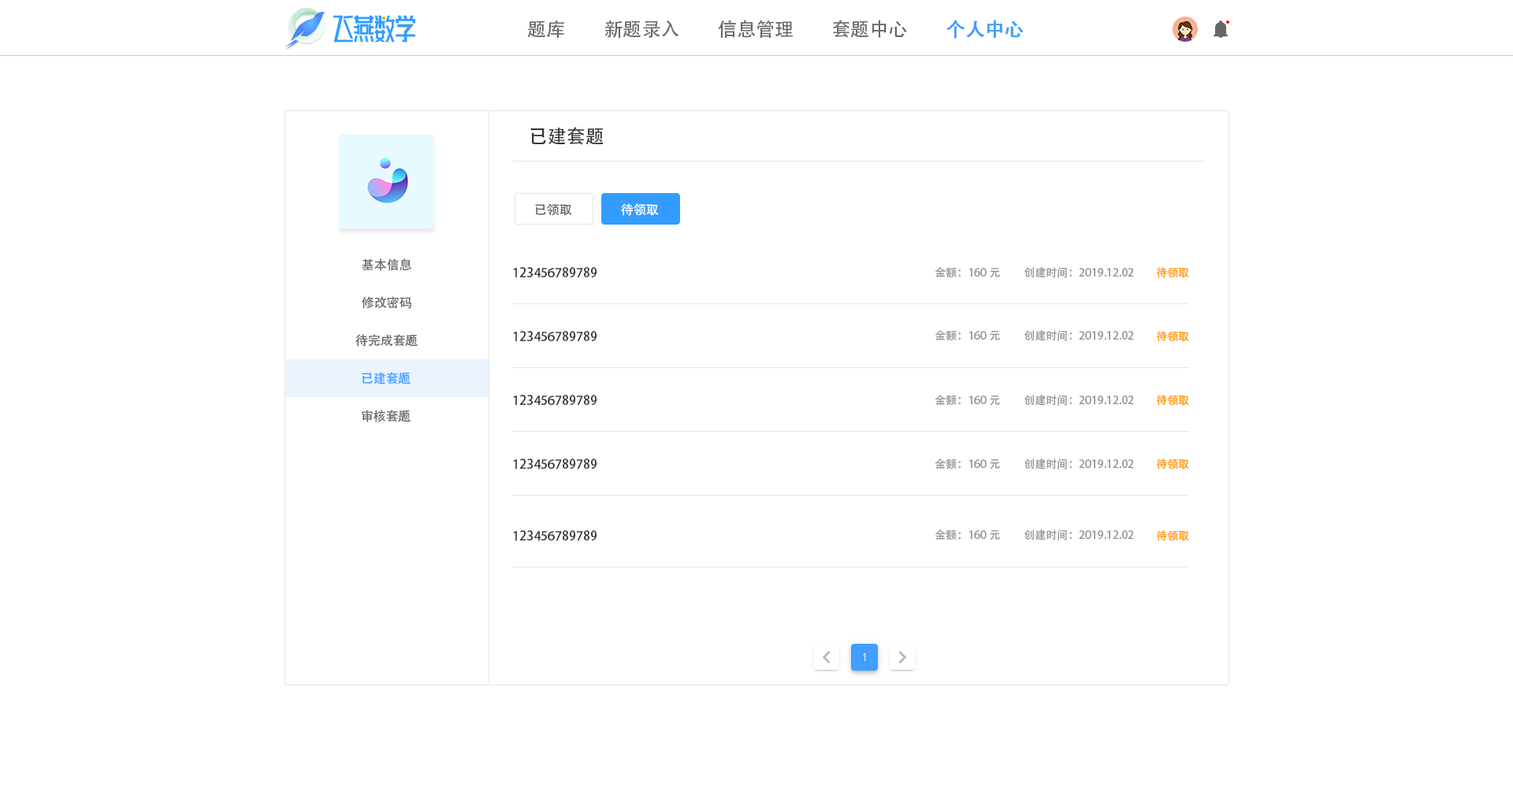
<style>
.page{position:relative;width:1513px;height:788px;background:#ffffff}
.page>*{position:absolute;margin:0}
.t1{font:18.9px "AdobeHeitiStd-Regular";color:#666666}
.t2{font:18.9px "AdobeHeitiStd-Regular";color:#409eff;font-weight:bold}
.t3{font:18.9px "AdobeHeitiStd-Regular";color:#333333}
.t4{font:12.6px "AdobeHeitiStd-Regular";color:#666666}
.t5{font:12.6px "AdobeHeitiStd-Regular";color:#ffffff}
.t6{font:12.6px "AdobeHeitiStd-Regular";color:#333333}
.t7{font:11px "AdobeHeitiStd-Regular";color:#999999}
.t8{font:11px "AdobeHeitiStd-Regular";color:#ff9814}
.t9{font:12.6px "AdobeHeitiStd-Regular";color:#409eff}
</style>
<div class="page">
<p class="t1" style="left:527px;top:20px;width:37px;height:18px">题库</p>
<p class="t1" style="left:604px;top:20px;width:75px;height:18px">新题录入</p>
<p class="t1" style="left:718px;top:20px;width:75px;height:19px">信息管理</p>
<p class="t1" style="left:833px;top:20px;width:74px;height:18px">套题中心</p>
<p class="t2" style="left:946px;top:20px;width:78px;height:19px">个人中心</p>
<p class="t3" style="left:530px;top:127px;width:74px;height:18px">已建套题</p>
<p class="t4" style="left:535px;top:203px;width:37px;height:13px">已领取</p>
<p class="t5" style="left:621px;top:203px;width:38px;height:13px">待领取</p>
<p class="t4" style="left:362px;top:258px;width:50px;height:13px">基本信息</p>
<p class="t6" style="left:513px;top:267px;width:84px;height:10px">123456789789</p>
<p class="t7" style="left:935px;top:267px;width:65px;height:10px">金额：160元</p>
<p class="t7" style="left:1024px;top:267px;width:110px;height:11px">创建时间：2019.12.02</p>
<p class="t8" style="left:1156px;top:267px;width:33px;height:11px">待领取</p>
<p class="t4" style="left:362px;top:296px;width:49px;height:13px">修改密码</p>
<p class="t4" style="left:355px;top:334px;width:63px;height:13px">待完成套题</p>
<p class="t6" style="left:513px;top:331px;width:84px;height:10px">123456789789</p>
<p class="t7" style="left:935px;top:330px;width:65px;height:10px">金额：160元</p>
<p class="t7" style="left:1024px;top:330px;width:110px;height:11px">创建时间：2019.12.02</p>
<p class="t8" style="left:1156px;top:331px;width:33px;height:11px">待领取</p>
<p class="t9" style="left:362px;top:372px;width:49px;height:13px">已建套题</p>
<p class="t6" style="left:513px;top:395px;width:84px;height:10px">123456789789</p>
<p class="t7" style="left:935px;top:395px;width:65px;height:10px">金额：160元</p>
<p class="t7" style="left:1024px;top:395px;width:110px;height:11px">创建时间：2019.12.02</p>
<p class="t8" style="left:1156px;top:395px;width:33px;height:11px">待领取</p>
<p class="t4" style="left:362px;top:410px;width:49px;height:12px">审核套题</p>
<p class="t6" style="left:513px;top:459px;width:84px;height:10px">123456789789</p>
<p class="t7" style="left:935px;top:459px;width:65px;height:10px">金额：160元</p>
<p class="t7" style="left:1024px;top:459px;width:110px;height:11px">创建时间：2019.12.02</p>
<p class="t8" style="left:1156px;top:459px;width:33px;height:11px">待领取</p>
<p class="t6" style="left:513px;top:530px;width:84px;height:11px">123456789789</p>
<p class="t7" style="left:935px;top:530px;width:65px;height:10px">金额：160元</p>
<p class="t7" style="left:1024px;top:530px;width:110px;height:11px">创建时间：2019.12.02</p>
<p class="t8" style="left:1156px;top:530px;width:33px;height:11px">待领取</p>
</div>
